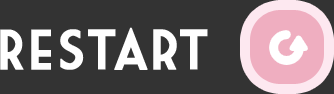
<style>
.page{position:relative;width:334px;height:94px;background:#333333}
.page>*{position:absolute;margin:0}
.t1{font:55px "MarketDeco";letter-spacing:0.04em;color:#ffffff;font-weight:bold}
</style>
<div class="page">
<p class="t1" style="left:0px;top:27px;width:208px;height:43px">Restart</p>
</div>
